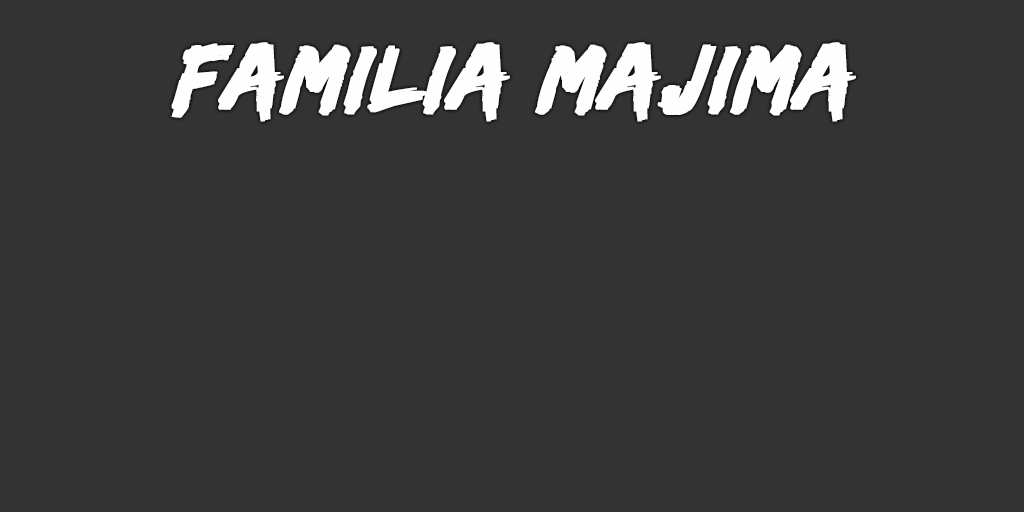
<style>
.page{position:relative;width:1024px;height:512px;background:#333333}
.page>*{position:absolute;margin:0}
.t1{font:94px "EdoSZ";color:#fefefe;font-weight:bold;font-style:italic;scale:1.04 1}
</style>
<div class="page">
<p class="t1" style="left:171px;top:42px;width:685px;height:80px">familia majima</p>
</div>
